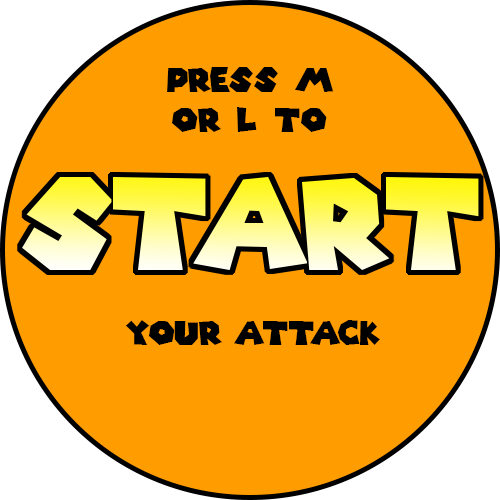
<style>
.page{position:relative;width:500px;height:500px;background:#ff9c00}
.page>*{position:absolute;margin:0}
.t1{font:33.3px "SuperMarioGalaxy";color:#000000}
</style>
<div class="page">
<p class="t1" style="left:167px;top:67px;width:167px;height:65px;text-align:center">Press M<br>or L to</p>
<p class="t1" style="left:125px;top:320px;width:255px;height:25px">Your attack</p>
</div>
